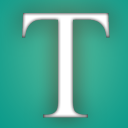
<style>
.page{position:relative;width:128px;height:128px}
.page>*{position:absolute;margin:0}
.t1{font:157.3px "TimesNewRomanPSMT"}
</style>
<div class="page">
<p class="t1" style="left:22px;top:13px;width:88px;height:105px">T</p>
</div>
